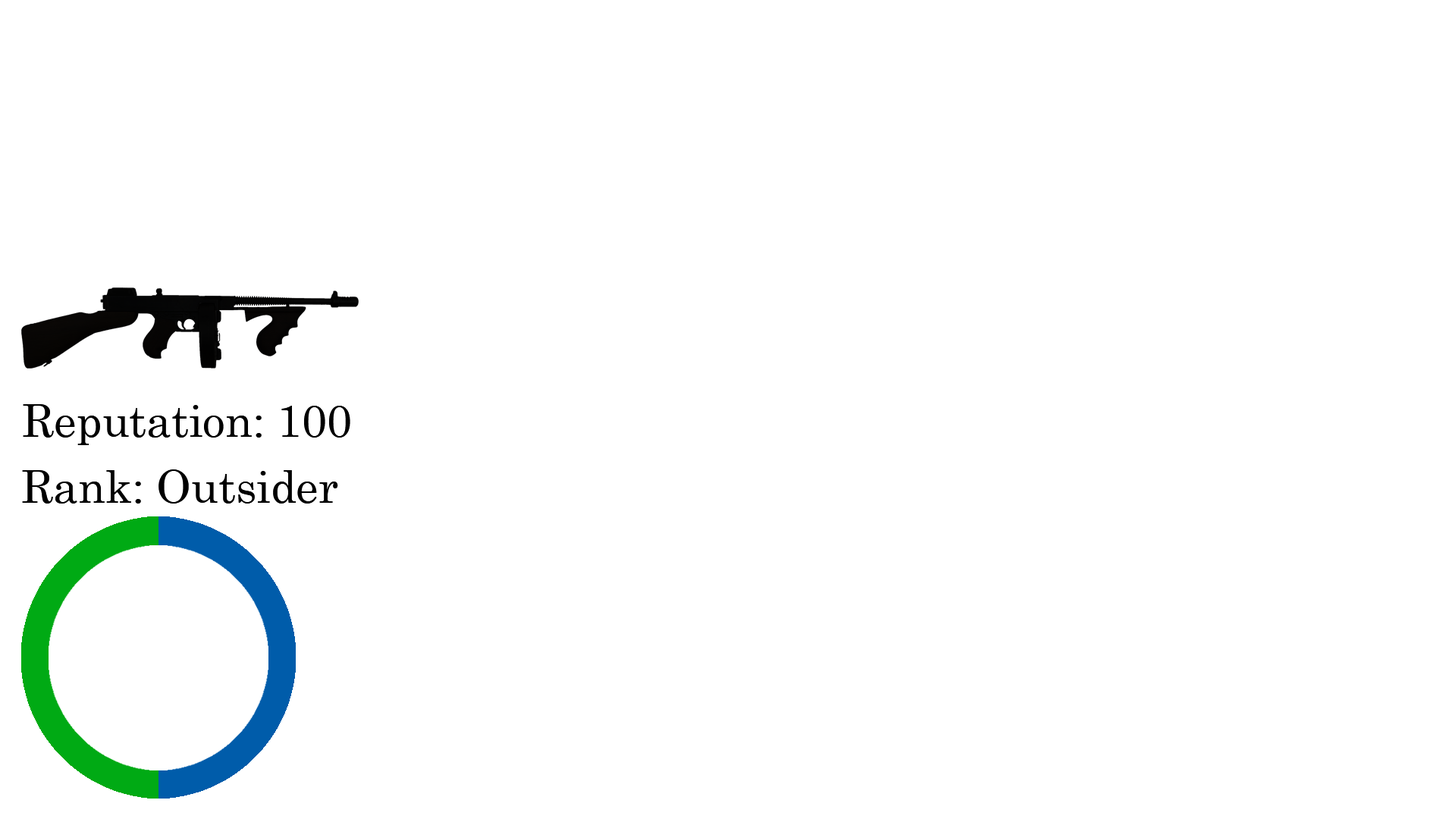
<style>
.page{position:relative;width:1456px;height:819px;background:#ffffff}
.page>*{position:absolute;margin:0}
.t1{font:44.5px "CenturySchoolbook";color:#000000}
</style>
<div class="page">
<p class="t1" style="left:23px;top:404px;width:327px;height:41px">Reputation: 100</p>
<p class="t1" style="left:22px;top:469px;width:316px;height:35px">Rank: Outsider</p>
</div>
